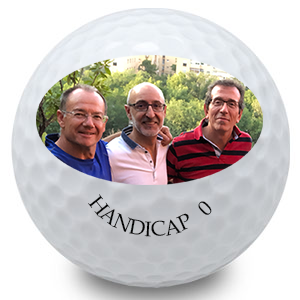
<style>
.page{position:relative;width:300px;height:300px;background:#ffffff}
.page>*{position:absolute;margin:0}
.t1{font:21px "BookAntiqua";color:#060606}
.t2{font:18px "BookAntiqua";color:#080808}
</style>
<div class="page">
<p class="t1" style="left:88px;top:194px;width:124px;height:43px"><span class="t2">          </span>HANDICAP   0</p>
</div>
